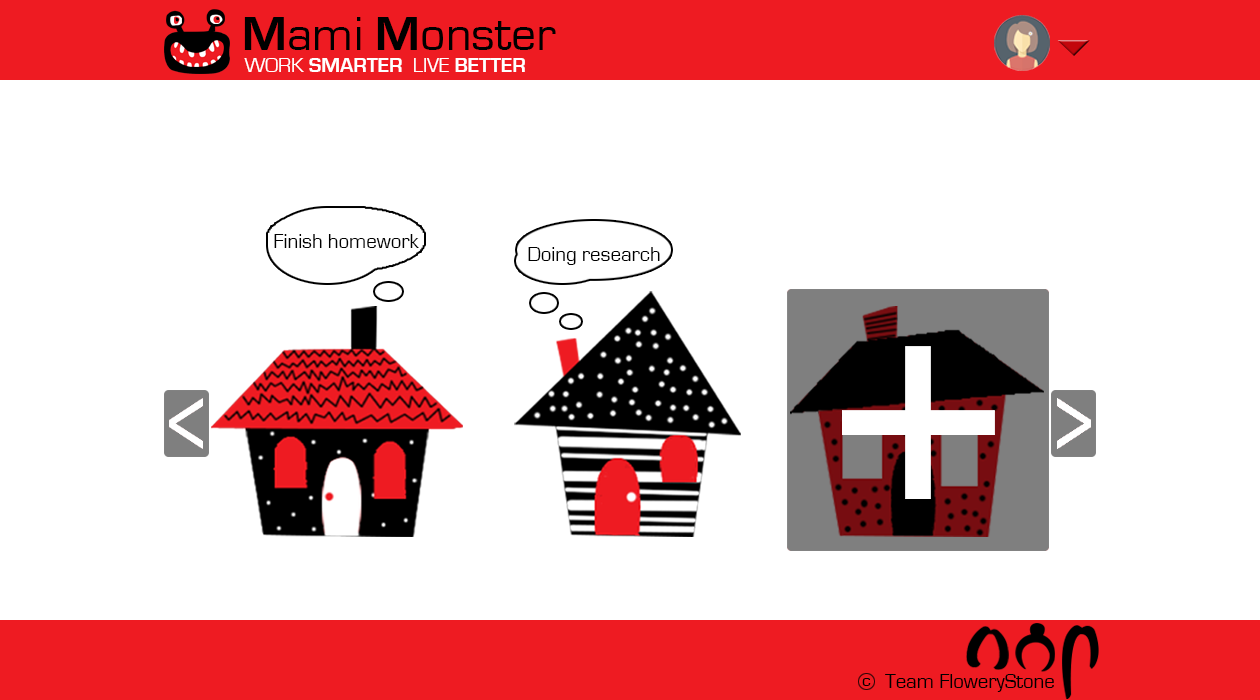
<style>
.page{position:relative;width:1260px;height:700px;background:#ffffff}
.page>*{position:absolute;margin:0}
.t1{font:50px "EurostileRegular";color:#000000}
.t2{font:50px "EurostileBold";color:#000000}
.t3{font:20.8px "EurostileBold";color:#ffffff}
.t4{font:20.8px "EurostileRegular";color:#ffffff}
.t5{font:20.8px "EurostileRegular";color:#000000}
.t6{font:17.7px "EurostileRegular";color:#000000}
</style>
<div class="page">
<p class="t1" style="left:244px;top:17px;width:312px;height:33px"><span class="t2">M</span>ami <span class="t2">M</span>onster</p>
<p class="t3" style="left:244px;top:58px;width:281px;height:14px"><span class="t4">WORK </span>SMARTER<span class="t4">  LIVE </span>BETTER</p>
<p class="t5" style="left:274px;top:234px;width:145px;height:14px">Finish homework</p>
<p class="t5" style="left:528px;top:247px;width:132px;height:18px">Doing research</p>
<p class="t6" style="left:862px;top:678px;width:9px;height:8px">c</p>
<p class="t5" style="left:885px;top:674px;width:169px;height:18px">Team FloweryStone</p>
</div>
